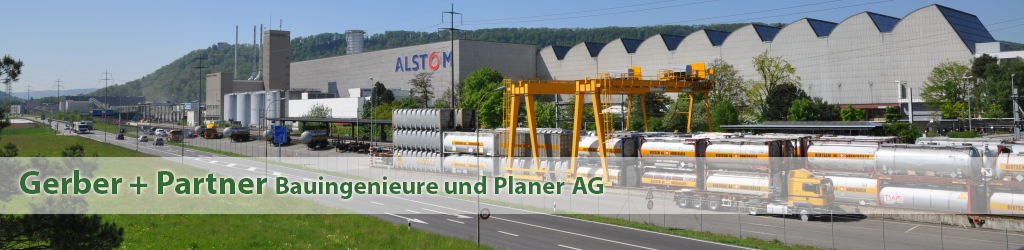
<style>
.page{position:relative;width:1024px;height:250px}
.page>*{position:absolute;margin:0}
.t1{font:25px "MyriadPro-Bold";color:#346a3b}
.t2{font:33.3px "MyriadPro-Bold";color:#346a3b}
</style>
<div class="page">
<p class="t1" style="left:20px;top:170px;width:583px;height:29px"><span class="t2">Gerber + Partner </span>Bauingenieure und Planer AG</p>
</div>
